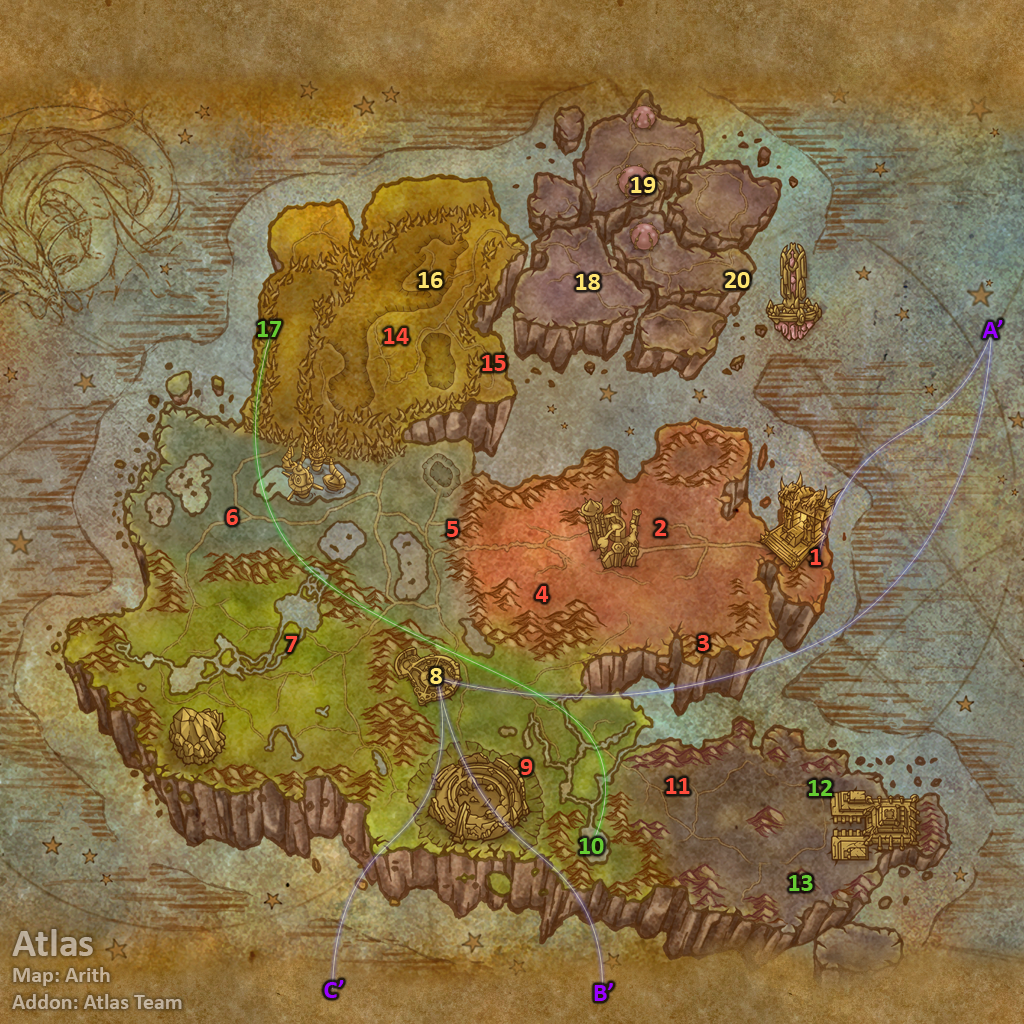
<style>
.page{position:relative;width:1024px;height:1024px}
.page>*{position:absolute;margin:0}
.t1{font:26px "Calibri-Bold";color:#fee570}
.t2{font:26px "Calibri-Bold";color:#66cc33}
.t3{font:26px "Calibri-Bold";color:#ff4c3c}
.t4{font:26px "Calibri-Bold";color:#9900ff}
.t5{font:22px "Calibri-Bold";color:#c0b09a}
.t6{font:40px "Calibri-Bold";color:#c0b09a}
</style>
<div class="page">
<p class="t1" style="left:631px;top:177px;width:25px;height:16px">19</p>
<p class="t1" style="left:418px;top:272px;width:25px;height:16px">16</p>
<p class="t1" style="left:576px;top:274px;width:24px;height:16px">18</p>
<p class="t1" style="left:725px;top:272px;width:25px;height:16px">20</p>
<p class="t2" style="left:257px;top:321px;width:25px;height:16px">17</p>
<p class="t3" style="left:384px;top:328px;width:25px;height:16px">14</p>
<p class="t4" style="left:982px;top:320px;width:21px;height:18px">A’</p>
<p class="t3" style="left:482px;top:355px;width:24px;height:16px">15</p>
<p class="t3" style="left:226px;top:509px;width:12px;height:16px">6</p>
<p class="t3" style="left:447px;top:521px;width:11px;height:16px">5</p>
<p class="t3" style="left:655px;top:520px;width:12px;height:16px">2</p>
<p class="t3" style="left:810px;top:549px;width:11px;height:16px">1</p>
<p class="t3" style="left:535px;top:586px;width:14px;height:16px">4</p>
<p class="t3" style="left:286px;top:636px;width:12px;height:16px">7</p>
<p class="t3" style="left:698px;top:635px;width:11px;height:16px">3</p>
<p class="t1" style="left:430px;top:668px;width:12px;height:16px">8</p>
<p class="t3" style="left:520px;top:759px;width:13px;height:16px">9</p>
<p class="t3" style="left:666px;top:778px;width:24px;height:16px">11</p>
<p class="t2" style="left:808px;top:780px;width:25px;height:16px">12</p>
<p class="t2" style="left:579px;top:838px;width:25px;height:16px">10</p>
<p class="t2" style="left:789px;top:875px;width:24px;height:16px">13</p>
<p class="t5" style="left:12px;top:929px;width:170px;height:80px"><span class="t6">Atlas<br></span>Map: Arith<br>Addon: Atlas Team</p>
<p class="t4" style="left:324px;top:980px;width:20px;height:18px">C’</p>
<p class="t4" style="left:594px;top:983px;width:19px;height:18px">B’</p>
</div>
